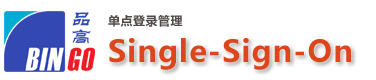
<style>
.page{position:relative;width:376px;height:80px;background:#ffffff}
.page>*{position:absolute;margin:0}
.t1{font:12px "MicrosoftYaHei-Bold";letter-spacing:0.04em;color:#504b4a}
.t2{font:30px "MicrosoftYaHei-Bold";letter-spacing:0.04em;color:#dd451c}
</style>
<div class="page">
<p class="t1" style="left:108px;top:15px;width:75px;height:12px">单点登录管理</p>
<p class="t2" style="left:109px;top:38px;width:242px;height:32px">Single-Sign-On</p>
</div>
